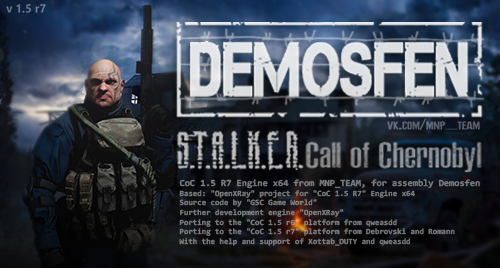
<style>
.page{position:relative;width:500px;height:268px}
.page>*{position:absolute;margin:0}
.t1{font:8px "Consolas-Bold";color:#7b7d80}
.t2{font:9.3px "Consolas-Bold";color:#7b7d80}
</style>
<div class="page">
<p class="t1" style="left:179px;top:179px;width:301px;height:67px"><span class="t2">CoC 1.5 R7 Engine x64 from MNP_TEAM, for assembly Demosfen<br></span>Based: "OpenXRay" project for "CoC 1.5 R7" Engine x64<br>Source code by "GSC Game World"<br>Further development engine "OpenXRay"<br>Porting to the "CoC 1.5 r6" platform from qweasdd<br>Porting to the "CoC 1.5 r7" platform from Debrovski and Romann<br>With the help and support of Xottab_DUTY and qweasdd</p>
</div>
